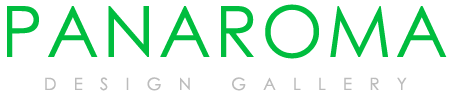
<style>
.page{position:relative;width:452px;height:98px;background:#ffffff}
.page>*{position:absolute;margin:0}
.t1{font:71px "LevenimMT";letter-spacing:0.05em;color:#00bd3e;text-transform:uppercase}
.t2{font:17px "LevenimMT";letter-spacing:1.01em;color:#bcbcbc}
</style>
<div class="page">
<p class="t1" style="left:7px;top:4px;width:440px;height:55px">Panaroma</p>
<p class="t2" style="left:45px;top:77px;width:362px;height:14px">DESIGN GALLERY</p>
</div>
